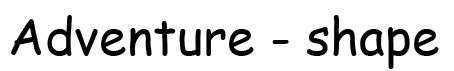
<style>
.page{position:relative;width:454px;height:71px;background:#ffffff}
.page>*{position:absolute;margin:0}
.t1{font:50px "ComicSansMS";color:#000000}
</style>
<div class="page">
<p class="t1" style="left:11px;top:15px;width:428px;height:54px">Adventure - shape</p>
</div>
